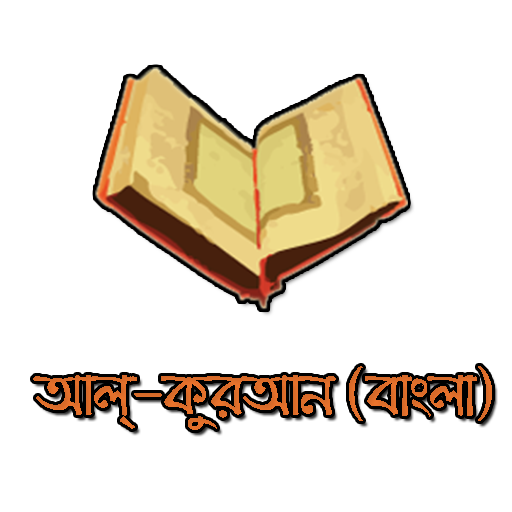
<style>
.page{position:relative;width:512px;height:512px;background:#ffffff}
.page>*{position:absolute;margin:0}
.t1{font:65px "BenSenHandwriting";letter-spacing:-0.025em;color:#eb742d;font-variant:small-caps}
</style>
<div class="page">
<p class="t1" style="left:33px;top:366px;width:459px;height:64px">আল্‌-কুরআন (বাংলা)</p>
</div>
